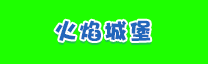
<style>
.page{position:relative;width:208px;height:64px;background:#1eff00}
.page>*{position:absolute;margin:0}
.t1{font:22.7px "DFPHaiBaoW12";letter-spacing:0.1em;color:#2266bb}
</style>
<div class="page">
<p class="t1" style="left:55px;top:20px;width:96px;height:21px">火焰城堡</p>
</div>
